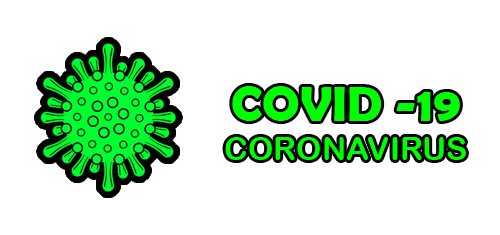
<style>
.page{position:relative;width:500px;height:235px;background:#ffffff}
.page>*{position:absolute;margin:0}
.t1{font:32.2px "ArialRoundedMTBold";color:#00ff00}
.t2{font:50.1px "BerlinSansFBDemi-Bold";color:#00ff00}
</style>
<div class="page">
<p class="t1" style="left:225px;top:86px;width:241px;height:74px;text-align:center"><span class="t2">COVID -19<br></span>CORONAVIRUS</p>
</div>
